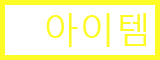
<style>
.page{position:relative;width:160px;height:60px;background:#ffffff}
.page>*{position:absolute;margin:0}
.t1{font:36px "MalgunGothicRegular";color:#fdfa24}
</style>
<div class="page">
<p class="t1" style="left:46px;top:13px;width:100px;height:34px">아이템</p>
</div>
